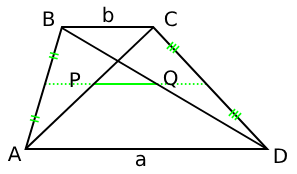
<style>
.page{position:relative;width:297px;height:174px;background:#ffffff}
.page>*{position:absolute;margin:0}
.t1{font:20px "DejaVuSans";color:#000000}
</style>
<div class="page">
<p class="t1" style="left:103px;top:6px;width:11px;height:17px">b</p>
<p class="t1" style="left:43px;top:11px;width:12px;height:15px">B</p>
<p class="t1" style="left:164px;top:11px;width:13px;height:16px">C</p>
<p class="t1" style="left:70px;top:72px;width:11px;height:15px">P</p>
<p class="t1" style="left:163px;top:70px;width:15px;height:18px">Q</p>
<p class="t1" style="left:7px;top:146px;width:15px;height:15px">A</p>
<p class="t1" style="left:274px;top:148px;width:13px;height:15px">D</p>
<p class="t1" style="left:135px;top:154px;width:11px;height:13px">a</p>
</div>
